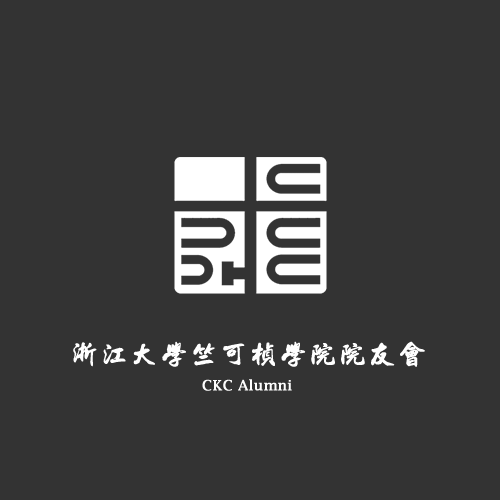
<style>
.page{position:relative;width:500px;height:500px;background:#333333}
.page>*{position:absolute;margin:0}
.t1{font:29px "beifang";color:#ffffff;font-weight:bold}
.t2{font:14.2px "LucidaFax";color:#ffffff;font-weight:bold}
</style>
<div class="page">
<p class="t1" style="left:73px;top:341px;width:352px;height:26px">浙江大学竺可桢学院院友会</p>
<p class="t2" style="left:202px;top:379px;width:90px;height:12px">CKC Alumni</p>
</div>
